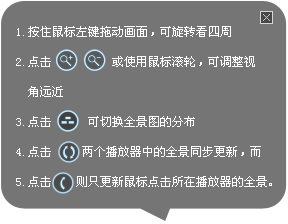
<style>
.page{position:relative;width:288px;height:224px;background:#757575}
.page>*{position:absolute;margin:0}
.t1{font:12px/30px "SimSun";color:#ffffff}
</style>
<div class="page">
<p class="t1" style="left:16px;top:26px;width:256px;height:161px">1.按住鼠标左键拖动画面，可旋转看四周<br>2.点击          或使用鼠标滚轮，可调整视<br>  角远近<br>3.点击      可切换全景图的分布<br>4.点击     两个播放器中的全景同步更新，而<br>5.点击    则只更新鼠标点击所在播放器的全景。</p>
</div>
